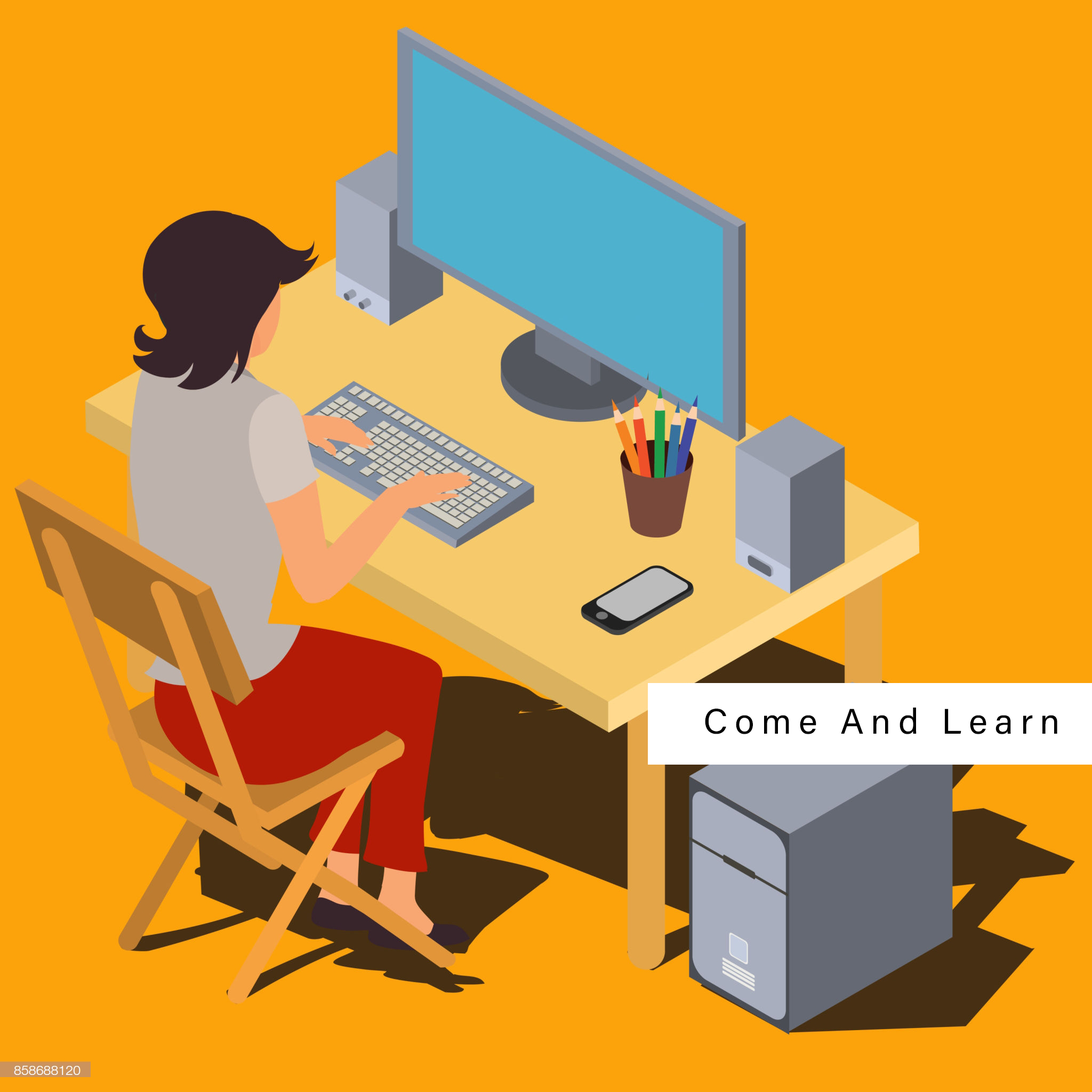
<style>
.page{position:relative;width:1092px;height:1092px;background:#fca30b}
.page>*{position:absolute;margin:0}
.t1{font:35.5px "AcuminConcept-Regular";letter-spacing:0.2em;color:#000000}
</style>
<div class="page">
<p class="t1" style="left:705px;top:708px;width:352px;height:26px">Come And Learn</p>
</div>
